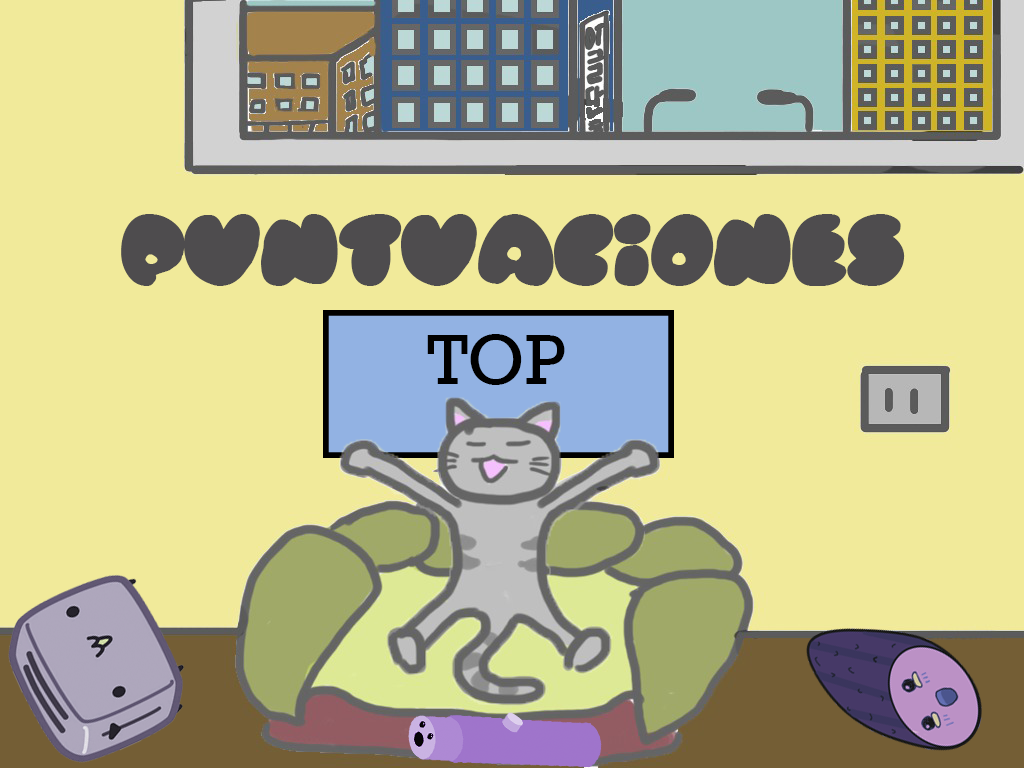
<style>
.page{position:relative;width:1024px;height:768px;background:#f1ea9a}
.page>*{position:absolute;margin:0}
.t1{font:72px "Rubberneck";color:#4e4c4e}
.t2{font:72px "Rockwell";color:#000000}
</style>
<div class="page">
<p class="t1" style="left:121px;top:214px;width:784px;height:72px">Puntuaciones</p>
<p class="t2" style="left:427px;top:334px;width:138px;height:51px">TOP</p>
</div>
